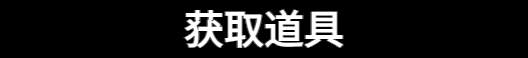
<style>
.page{position:relative;width:528px;height:58px;background:#000000}
.page>*{position:absolute;margin:0}
.t1{font:40px "WebPSD-18463539-0-Regular";color:#ffffff;font-weight:bold}
</style>
<div class="page">
<p class="t1" style="left:0px;top:0px;width:528px;height:58px">获取道具</p>
</div>
